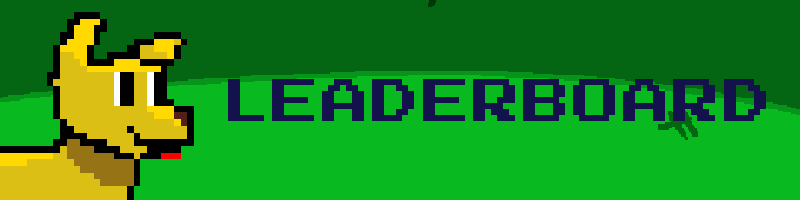
<style>
.page{position:relative;width:800px;height:200px;background:#08ba20}
.page>*{position:absolute;margin:0}
.t1{font:48px "PressStart2P";letter-spacing:0.045em;color:#14124c}
</style>
<div class="page">
<p class="t1" style="left:228px;top:79px;width:538px;height:42px">LEADERBOARD</p>
</div>
